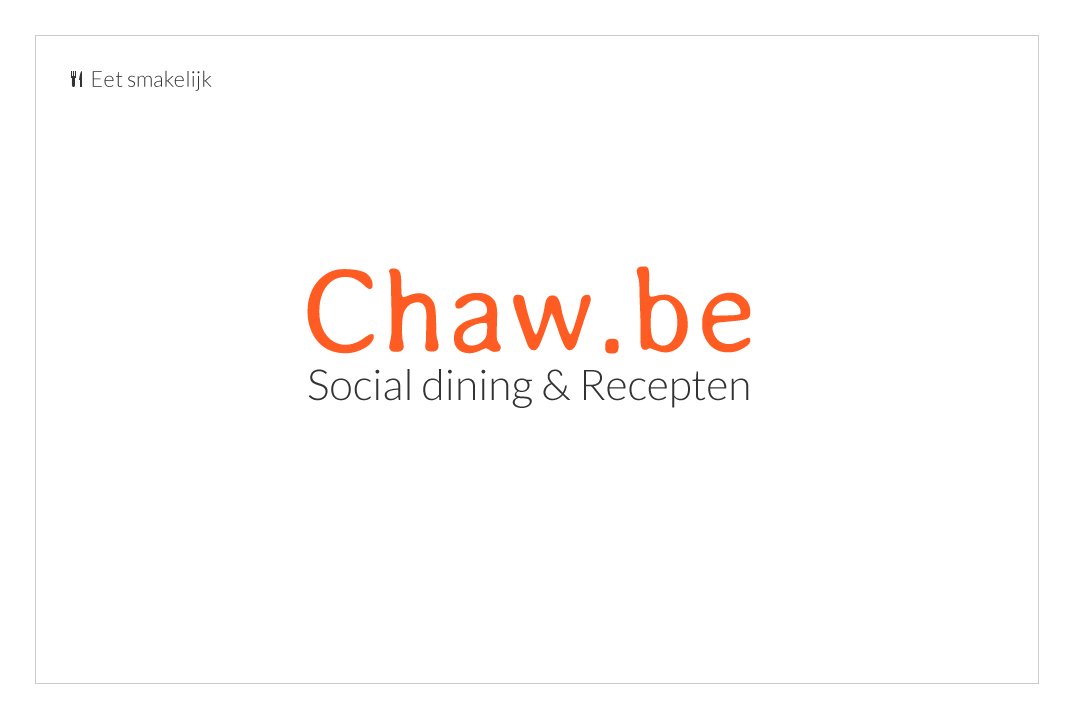
<style>
.page{position:relative;width:1075px;height:720px;background:#ffffff}
.page>*{position:absolute;margin:0}
.t1{font:21.7px "Lato-Light";color:#333333}
.t2{font:121.2px "Averia-Light";color:#ff5c23}
.t3{font:42.6px "Lato-Light";color:#333333}
</style>
<div class="page">
<p class="t1" style="left:92px;top:70px;width:120px;height:21px">Eet smakelijk</p>
<p class="t2" style="left:307px;top:266px;width:444px;height:88px">Chaw.be</p>
<p class="t3" style="left:308px;top:369px;width:441px;height:39px">Social dining &amp; Recepten</p>
</div>
